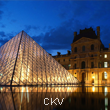
<style>
.page{position:relative;width:110px;height:110px}
.page>*{position:absolute;margin:0}
.t1{font:10px "ArialMT";color:#cec8c5}
</style>
<div class="page">
<p class="t1" style="left:44px;top:98px;width:20px;height:7px">CKV</p>
</div>
